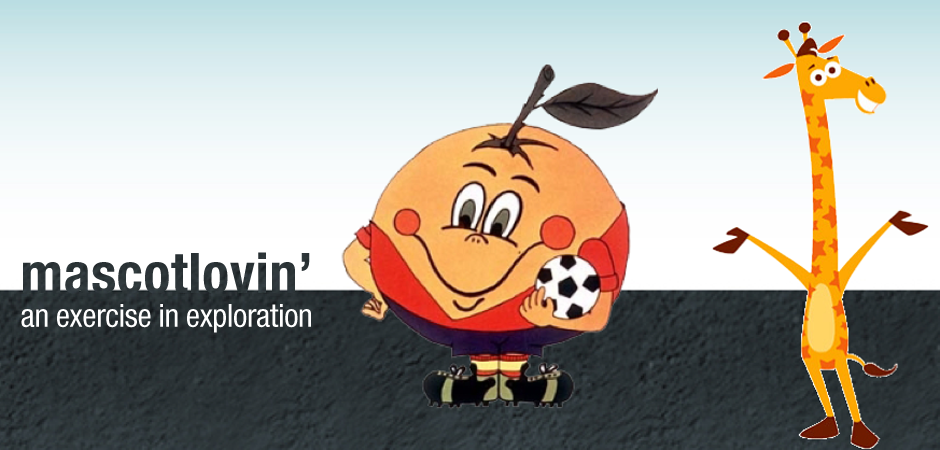
<style>
.page{position:relative;width:940px;height:450px}
.page>*{position:absolute;margin:0}
.t1{font:32px "HelveticaNeueLTStd-Cn";letter-spacing:-0.01em;color:#ffffff}
</style>
<div class="page">
<p class="t1" style="left:21px;top:304px;width:290px;height:29px">an exercise in exploration</p>
</div>
